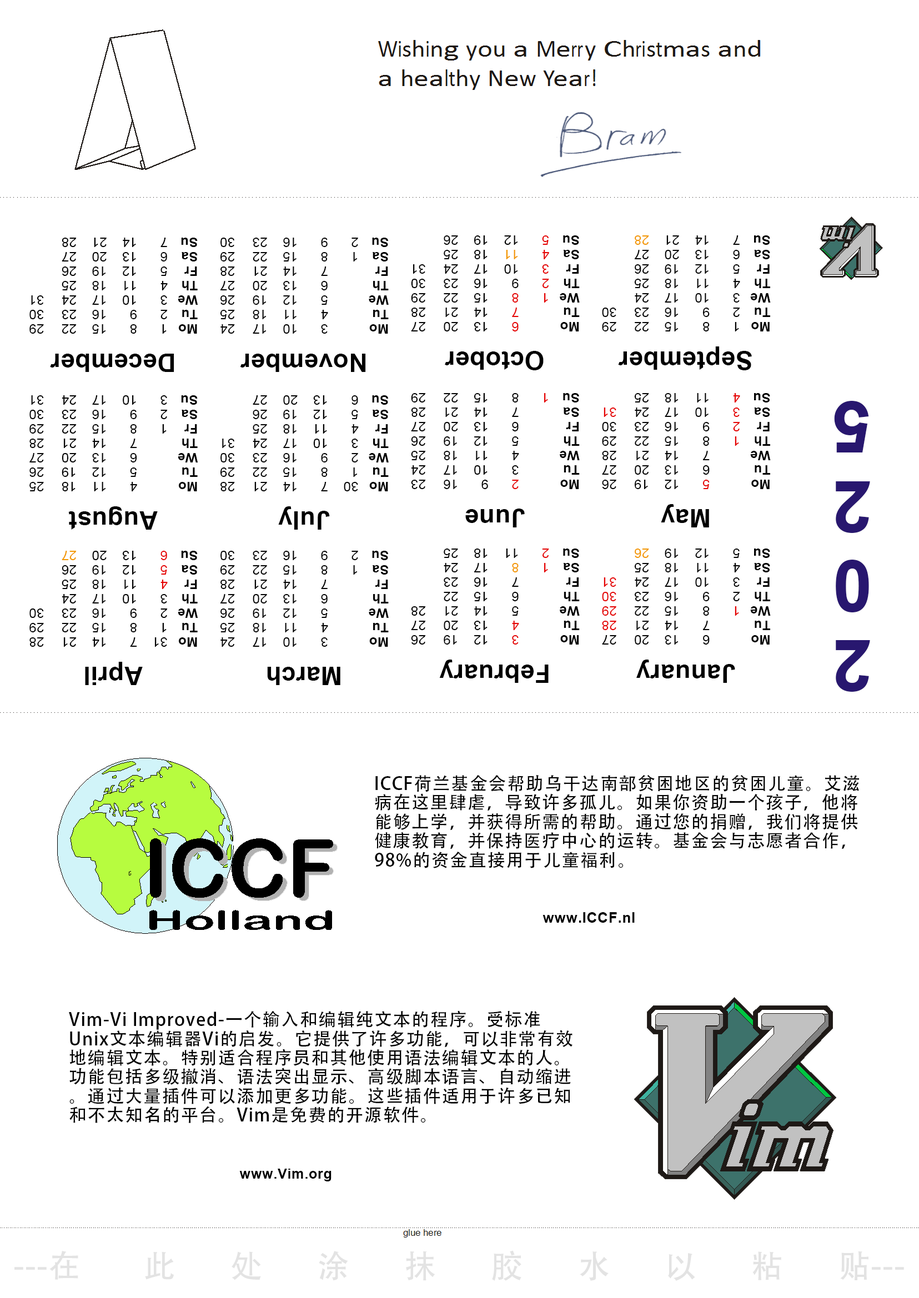
<style>
.page{position:relative;width:919px;height:1298px;background:#ffffff}
.page>*{position:absolute;margin:0}
.t1{font:13.5px/14.5px "ArialMT";letter-spacing:0.01em;color:#000000}
.t2{font:13.5px/14.5px "Arial-BoldMT";letter-spacing:0.01em;color:#000000}
.t3{font:13.5px/14.5px "ArialMT";letter-spacing:0.01em;color:#e50000}
.t4{font:13.5px/14.5px "ArialMT";letter-spacing:0.01em;color:#f39800}
.t5{font:25.5px "Arial-BoldMT";letter-spacing:0.01em;color:#000000}
.t6{font:70.9px/79.4px "Arial-BoldMT";letter-spacing:0.05em;color:#28176f}
.t7{font:17.7px/19.1px "AdobeHeitiStd-Regular";letter-spacing:0.05em;color:#000000}
.t8{font:14.7px "Arial-BoldMT";letter-spacing:0.02em;color:#000000}
.t9{font:14.1px "Arial-BoldMT";letter-spacing:0.02em;color:#000000}
.t10{font:31.8px "AdobeHeitiStd-Regular";letter-spacing:0.02em;color:#e3e3e3}
</style>
<div class="page">
<p class="t1" style="left:29px;top:238px;width:169px;height:96px;text-align:right;rotate:-180deg"><span class="t2">Mo </span>1  8  15 22 29<br><span class="t2">Tu </span>2  9  16 23 30<br><span class="t2">We </span>3  10 17 24 31<br><span class="t2">Th </span>4  11 18 25 <br><span class="t2">Fr  </span>5  12 19 26 <br><span class="t2">Sa </span>6  13 20 27 <br><span class="t2">Su </span>7  14 21 28</p>
<p class="t1" style="left:220px;top:238px;width:169px;height:96px;text-align:right;rotate:-180deg"><span class="t2">Mo </span>  3  10 17 24<br><span class="t2">Tu   </span>4  11 18 25<br><span class="t2">We </span>  5  12 19 26<br><span class="t2">Th </span>  6  13 20 27<br><span class="t2">Fr  </span>  7  14 21 28<br><span class="t2">Sa </span>1  8  15 22 29<br><span class="t2">Su </span>2  9  16 23 30</p>
<p class="t1" style="left:411px;top:235px;width:169px;height:96px;text-align:right;rotate:-180deg"><span class="t2">Mo   </span><span class="t3">6</span>  13 20 27<br><span class="t2">Tu   </span><span class="t3">7</span>  14 21 28<br><span class="t2">We </span><span class="t3">1  8</span>  15 22 29<br><span class="t2">Th </span><span class="t3">2</span>  9  16 23 30<br><span class="t2">Fr  </span><span class="t3">3</span>  10 17 24 31<br><span class="t2">Sa </span><span class="t3">4  </span><span class="t4">11</span> 18 25 <br><span class="t2">Su </span><span class="t3">5</span>  12 19 26</p>
<p class="t1" style="left:602px;top:235px;width:169px;height:96px;text-align:right;rotate:-180deg"><span class="t2">Mo </span>1  8  15 22 29<br><span class="t2">Tu </span>2  9  16 23 30<br><span class="t2">We </span>3  10 17 24 <br><span class="t2">Th </span>4  11 18 25 <br><span class="t2">Fr  </span>5  12 19 26 <br><span class="t2">Sa </span>6  13 20 27 <br><span class="t2">Su </span>7  14 21 <span class="t4">28</span></p>
<p class="t5" style="left:50px;top:354px;width:124px;height:18px;rotate:-180deg">December</p>
<p class="t5" style="left:240px;top:354px;width:126px;height:18px;rotate:-180deg">November</p>
<p class="t5" style="left:445px;top:351px;width:98px;height:19px;rotate:-180deg">October</p>
<p class="t5" style="left:618px;top:346px;width:134px;height:24px;rotate:-180deg">September</p>
<p class="t1" style="left:29px;top:395px;width:169px;height:96px;text-align:right;rotate:-180deg"><span class="t2">Mo </span>  4  11 18 25<br><span class="t2">Tu   </span>5  12 19 26<br><span class="t2">We </span>  6  13 20 27<br><span class="t2">Th </span>  7  14 21 28<br><span class="t2">Fr  </span>1  8  15 22 29<br><span class="t2">Sa </span>2  9  16 23 30<br><span class="t2">Su </span>3  10 17 24 31</p>
<p class="t1" style="left:220px;top:395px;width:169px;height:96px;text-align:right;rotate:-180deg"><span class="t2">Mo </span>30 7  14 21 28<br><span class="t2">Tu </span>1  8  15 22 29<br><span class="t2">We </span>2  9  16 23 30<br><span class="t2">Th </span>3  10 17 24 31<br><span class="t2">Fr  </span>4  11 18 25 <br><span class="t2">Sa </span>5  12 19 26 <br><span class="t2">Su </span>6  13 20 27</p>
<p class="t1" style="left:411px;top:393px;width:169px;height:96px;text-align:right;rotate:-180deg"><span class="t2">Mo   </span><span class="t3">2</span>  9  16 23<br><span class="t2">Tu   </span>3  10 17 24<br><span class="t2">We </span>  4  11 18 25<br><span class="t2">Th </span>  5  12 19 26<br><span class="t2">Fr  </span>  6  13 20 27<br><span class="t2">Sa </span>  7  14 21 28<br><span class="t2">Su </span><span class="t3">1</span>  8  15 22 29</p>
<p class="t1" style="left:602px;top:393px;width:169px;height:96px;text-align:right;rotate:-180deg"><span class="t2">Mo   </span><span class="t3">5</span>  12 19 26<br><span class="t2">Tu   </span>6  13 20 27<br><span class="t2">We </span>  7  14 21 28<br><span class="t2">Th </span><span class="t3">1</span>  8  15 22 29<br><span class="t2">Fr  </span><span class="t3">2</span>  9  16 23 30<br><span class="t2">Sa </span><span class="t3">3</span>  10 17 24 <span class="t3">31<br></span><span class="t2">Su </span><span class="t3">4</span>  11 18 25</p>
<p class="t6" style="left:834px;top:401px;width:36px;height:291px;text-align:center;rotate:180deg">2<br>0<br>2<br>5</p>
<p class="t5" style="left:68px;top:506px;width:90px;height:24px;rotate:-180deg">August</p>
<p class="t5" style="left:278px;top:506px;width:52px;height:24px;rotate:-180deg">July</p>
<p class="t5" style="left:465px;top:509px;width:60px;height:18px;rotate:-180deg">June</p>
<p class="t5" style="left:661px;top:504px;width:48px;height:23px;rotate:-180deg">May</p>
<p class="t1" style="left:29px;top:551px;width:169px;height:96px;text-align:right;rotate:-180deg"><span class="t2">Mo </span>31 7  14 21 28<br><span class="t2">Tu </span>1  8  15 22 29<br><span class="t2">We </span>2  9  16 23 30<br><span class="t2">Th </span>3  10 17 24 <br><span class="t2">Fr  </span><span class="t3">4</span>  11 18 25 <br><span class="t2">Sa </span><span class="t3">5</span>  12 19 26 <br><span class="t2">Su </span><span class="t3">6</span>  13 20 <span class="t4">27</span></p>
<p class="t1" style="left:220px;top:551px;width:169px;height:96px;text-align:right;rotate:-180deg"><span class="t2">Mo </span>  3  10 17 24<br><span class="t2">Tu   </span>4  11 18 25<br><span class="t2">We </span>  5  12 19 26<br><span class="t2">Th </span>  6  13 20 27<br><span class="t2">Fr  </span>  7  14 21 28<br><span class="t2">Sa </span>1  8  15 22 29<br><span class="t2">Su </span>2  9  16 23 30</p>
<p class="t1" style="left:411px;top:548px;width:169px;height:97px;text-align:right;rotate:-180deg"><span class="t2">Mo   </span><span class="t3">3</span>  12 19 26<br><span class="t2">Tu   </span><span class="t3">4</span>  13 20 27<br><span class="t2">We </span>  5  14 21 28<br><span class="t2">Th </span>  6  15 22 <br><span class="t2">Fr  </span>  7  16 23 <br><span class="t2">Sa </span><span class="t3">1  </span><span class="t4">8</span>  17 24 <br><span class="t2">Su </span><span class="t3">2</span>  11 18 25</p>
<p class="t1" style="left:602px;top:548px;width:169px;height:97px;text-align:right;rotate:-180deg"><span class="t2">Mo </span>  6  13 20 27<br><span class="t2">Tu   </span>7  14 21 <span class="t3">28<br></span><span class="t2">We </span><span class="t3">1</span>  8  15 22 <span class="t3">29<br></span><span class="t2">Th </span>2  9  16 23 <span class="t3">30<br></span><span class="t2">Fr  </span>3  10 17 24 <span class="t3">31<br></span><span class="t2">Sa </span>4  11 18 25 <br><span class="t2">Su </span>5  12 19 <span class="t4">26</span></p>
<p class="t5" style="left:85px;top:662px;width:58px;height:23px;rotate:-180deg">April</p>
<p class="t5" style="left:439px;top:659px;width:109px;height:24px;rotate:-180deg">February</p>
<p class="t5" style="left:636px;top:659px;width:99px;height:24px;rotate:-180deg">January</p>
<p class="t5" style="left:267px;top:667px;width:73px;height:18px;rotate:-180deg">March</p>
<p class="t7" style="left:375px;top:774px;width:484px;height:94px">ICCF荷兰基金会帮助乌干达南部贫困地区的贫困儿童。艾滋病在这里肆虐，导致许多孤儿。如果你资助一个孩子，他将能够上学，并获得所需的帮助。通过您的捐赠，我们将提供健康教育，并保持医疗中心的运转。基金会与志愿者合作，98%的资金直接用于儿童福利。</p>
<p class="t8" style="left:542px;top:912px;width:93px;height:11px">www.ICCF.nl</p>
<p class="t7" style="left:69px;top:1010px;width:503px;height:113px">Vim-Vi Improved-一个输入和编辑纯文本的程序。受标准Unix文本编辑器Vi的启发。它提供了许多功能，可以非常有效地编辑文本。特别适合程序员和其他使用语法编辑文本的人。功能包括多级撤消、语法突出显示、高级脚本语言、自动缩进。通过大量插件可以添加更多功能。这些插件适用于许多已知和不太知名的平台。Vim是免费的开源软件。</p>
<p class="t9" style="left:239px;top:1169px;width:92px;height:12px">www.Vim.org</p>
<p class="t10" style="left:14px;top:1250px;width:890px;height:31px">---在  此  处  涂  抹  胶  水  以  粘  贴---</p>
</div>
